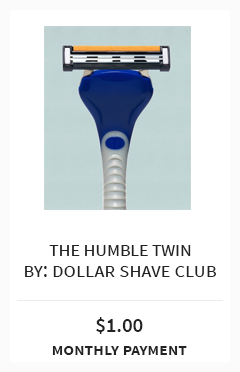
<style>
.page{position:relative;width:240px;height:372px;background:#ffffff}
.page>*{position:absolute;margin:0}
.t1{font:20.8px "SourceSansPro-Regular";letter-spacing:-0.025em;color:#232323;font-variant:small-caps}
.t2{font:20.8px "SourceSansPro-Regular";color:#232323;font-variant:small-caps}
.t3{font:17.8px/22.2px "SourceSansPro-Semibold";color:#232323;font-variant:small-caps}
.t4{font:20.6px/22.2px "SourceSansPro-Semibold";color:#232323}
</style>
<div class="page">
<p class="t1" style="left:49px;top:245px;width:142px;height:11px">the humble twin</p>
<p class="t2" style="left:25px;top:266px;width:191px;height:11px">by: dollar shave club</p>
<p class="t3" style="left:52px;top:317px;width:135px;height:38px;text-align:center"><span class="t4">$1.00<br></span>monthly payment</p>
</div>
